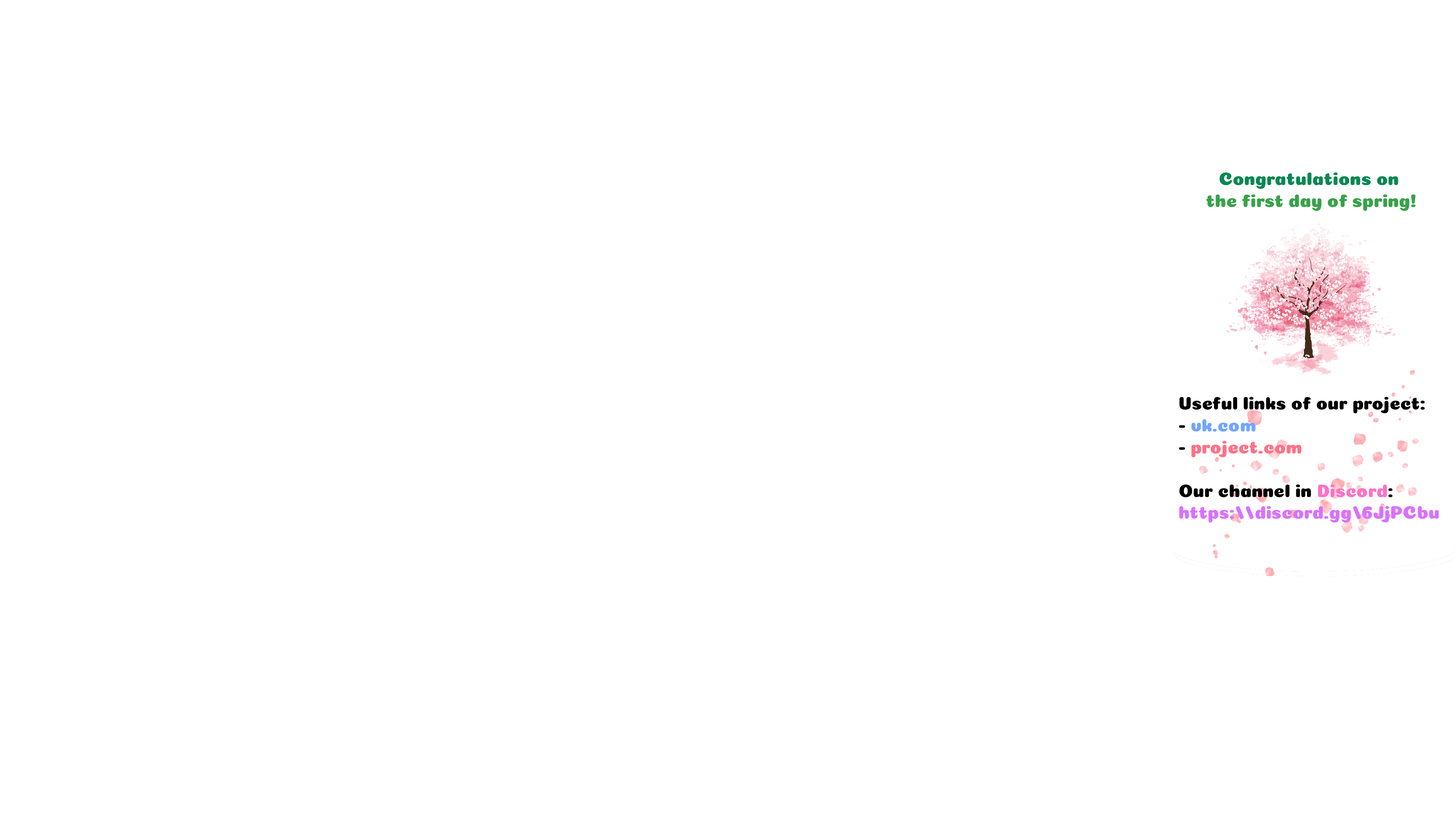
<style>
.page{position:relative;width:1456px;height:819px;background:#ffffff}
.page>*{position:absolute;margin:0}
.t1{font:18.2px "Coiny-Regular";color:#37a349}
.t2{font:18.2px "Coiny-Regular";color:#088853}
.t3{font:18.2px "Coiny-Regular";color:#000000}
.t4{font:18.2px "Coiny-Regular";color:#71a6ff}
.t5{font:18.2px "Coiny-Regular";color:#ff7185}
.t6{font:18.2px "Coiny-Regular";color:#ff71c5}
.t7{font:18.2px "Coiny-Regular";color:#d971ff}
</style>
<div class="page">
<p class="t1" style="left:1206px;top:172px;width:209px;height:39px;text-align:center"><span class="t2">Congratulations on <br></span>the first day of spring!</p>
<p class="t3" style="left:1179px;top:397px;width:260px;height:125px">Useful links of our project:<br>- <span class="t4">vk.com<br></span>- <span class="t5">project.com<br></span><br>Our channel in <span class="t6">Discord</span>:<br><span class="t7">https://discord.gg/6JjPCbu</span></p>
</div>
